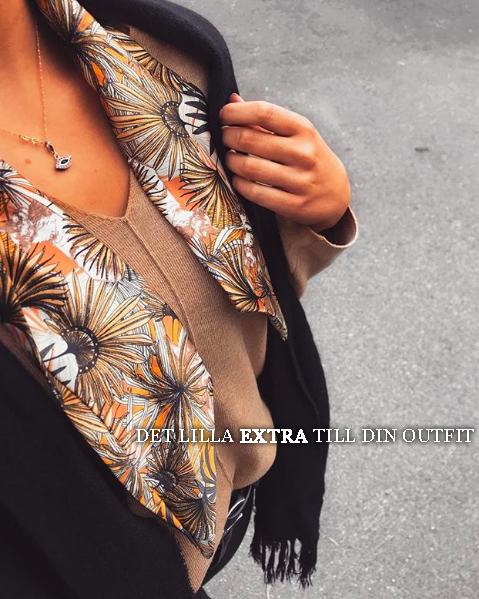
<style>
.page{position:relative;width:479px;height:599px}
.page>*{position:absolute;margin:0}
.t1{font:19.1px "Georgia";color:#ffffff}
.t2{font:19.1px "Georgia";color:#ffffff;font-weight:bold}
</style>
<div class="page">
<p class="t1" style="left:136px;top:429px;width:338px;height:14px">DET LILLA <span class="t2">EXTRA </span>TILL DIN OUTFIT</p>
</div>
